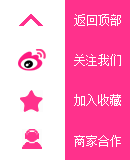
<style>
.page{position:relative;width:130px;height:160px;background:#ffffff}
.page>*{position:absolute;margin:0}
.t1{font:12px "SimSun";color:#ffffff}
</style>
<div class="page">
<p class="t1" style="left:74px;top:14px;width:47px;height:12px">返回顶部</p>
<p class="t1" style="left:74px;top:54px;width:47px;height:12px">关注我们</p>
<p class="t1" style="left:74px;top:94px;width:47px;height:12px">加入收藏</p>
<p class="t1" style="left:74px;top:135px;width:47px;height:12px">商家合作</p>
</div>
